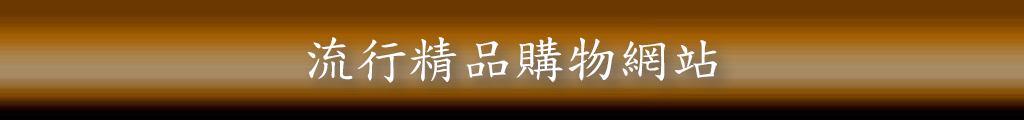
<style>
.page{position:relative;width:1024px;height:120px}
.page>*{position:absolute;margin:0}
.t1{font:52px "DFKaiShu-SB-Estd-BF";letter-spacing:0.01em;color:#ffffff}
</style>
<div class="page">
<p class="t1" style="left:307px;top:37px;width:410px;height:46px">流行精品購物網站</p>
</div>
